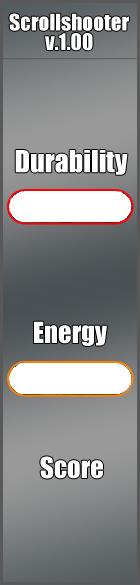
<style>
.page{position:relative;width:140px;height:585px}
.page>*{position:absolute;margin:0}
.t1{font:21.3px "Impact";color:#ffffff}
.t2{font:28px "Impact";color:#ffffff}
.t3{font:26.7px "Impact";color:#ffffff}
</style>
<div class="page">
<p class="t1" style="left:9px;top:13px;width:120px;height:18px">Scrollshooter</p>
<p class="t1" style="left:45px;top:33px;width:48px;height:18px">v.1.00</p>
<p class="t2" style="left:15px;top:150px;width:113px;height:25px">Durability</p>
<p class="t3" style="left:34px;top:321px;width:73px;height:25px">Energy</p>
<p class="t3" style="left:40px;top:456px;width:63px;height:23px">Score</p>
</div>
